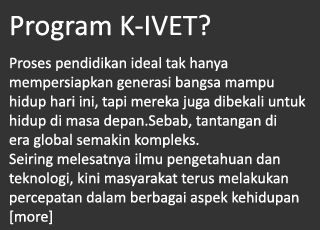
<style>
.page{position:relative;width:320px;height:230px;background:#333333}
.page>*{position:absolute;margin:0}
.t1{font:30px "Calibri";color:#ffffff}
.t2{font:16px "Calibri";color:#ffffff}
</style>
<div class="page">
<p class="t1" style="left:11px;top:14px;width:199px;height:27px">Program K-IVET?</p>
<p class="t2" style="left:9px;top:57px;width:297px;height:168px">Proses pendidikan ideal tak hanya <br>mempersiapkan generasi bangsa mampu <br>hidup hari ini, tapi mereka juga dibekali untuk <br>hidup di masa depan.Sebab, tantangan di <br>era global semakin kompleks. <br>Seiring melesatnya ilmu pengetahuan dan <br>teknologi, kini masyarakat terus melakukan <br>percepatan dalam berbagai aspek kehidupan<br>[more]</p>
</div>
